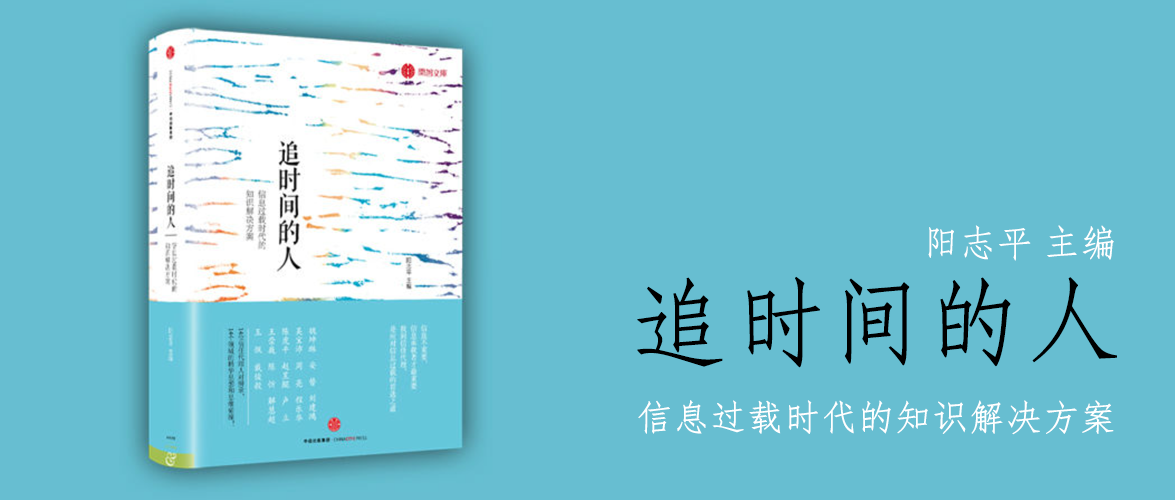
<style>
.page{position:relative;width:1175px;height:500px;background:#67bed1}
.page>*{position:absolute;margin:0}
.t1{font:36px "STFangsong";color:#ffffff;font-weight:bold}
.t2{font:96px "STFangsong";color:#000000;font-weight:bold}
.t3{font:36px "FangSong";color:#ffffff;font-weight:bold}
</style>
<div class="page">
<p class="t1" style="left:928px;top:225px;width:186px;height:36px">阳志平 主编</p>
<p class="t2" style="left:637px;top:276px;width:480px;height:92px">追时间的人</p>
<p class="t3" style="left:638px;top:400px;width:476px;height:35px">信息过载时代的知识解决方案</p>
</div>
